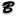
<style>
.page{position:relative;width:16px;height:16px;background:#ffffff}
.page>*{position:absolute;margin:0}
.t1{font:16px "BrushScriptStd";color:#000000;font-weight:bold}
</style>
<div class="page">
<p class="t1" style="left:2px;top:1px;width:13px;height:12px">B</p>
</div>
